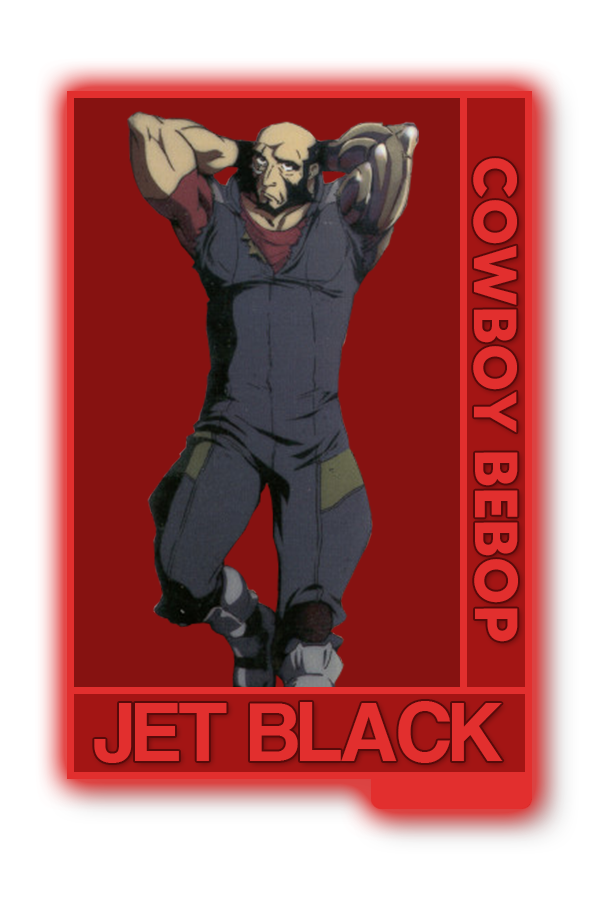
<style>
.page{position:relative;width:600px;height:900px;background:#861211}
.page>*{position:absolute;margin:0}
.t1{font:60.5px "MADETOMMY-Bold";color:#e22f2e}
.t2{font:86.6px "CoolveticaRg-Regular";color:#e22f2e}
</style>
<div class="page">
<p class="t1" style="left:473px;top:158px;width:45px;height:484px;rotate:90deg">COWBOY BEBOP</p>
<p class="t2" style="left:94px;top:701px;width:409px;height:62px">JET BLACK</p>
</div>
